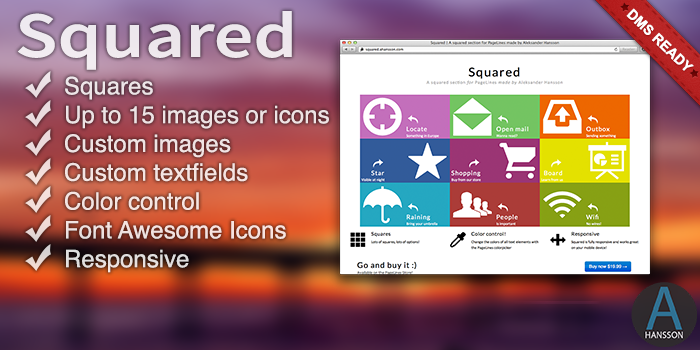
<style>
.page{position:relative;width:700px;height:350px}
.page>*{position:absolute;margin:0}
.t1{font:65px "SourceSansPro-Semibold";color:#ffffff;scale:1.2 1}
.t2{font:14px "Arial-BoldMT";color:#ffffff;text-transform:uppercase}
.t3{font:24px "Helvetica";color:#f0e3e2}
</style>
<div class="page">
<p class="t1" style="left:17px;top:11px;width:275px;height:59px;opacity:0.8">Squared</p>
<p class="t2" style="left:626px;top:8px;width:68px;height:63px;rotate:44deg">DMS Ready</p>
<p class="t3" style="left:65px;top:76px;width:264px;height:197px">Squares<br>Up to 15 images or icons<br>Custom images<br>Custom textfields<br>Color control<br>Font Awesome Icons<br>Responsive</p>
</div>
